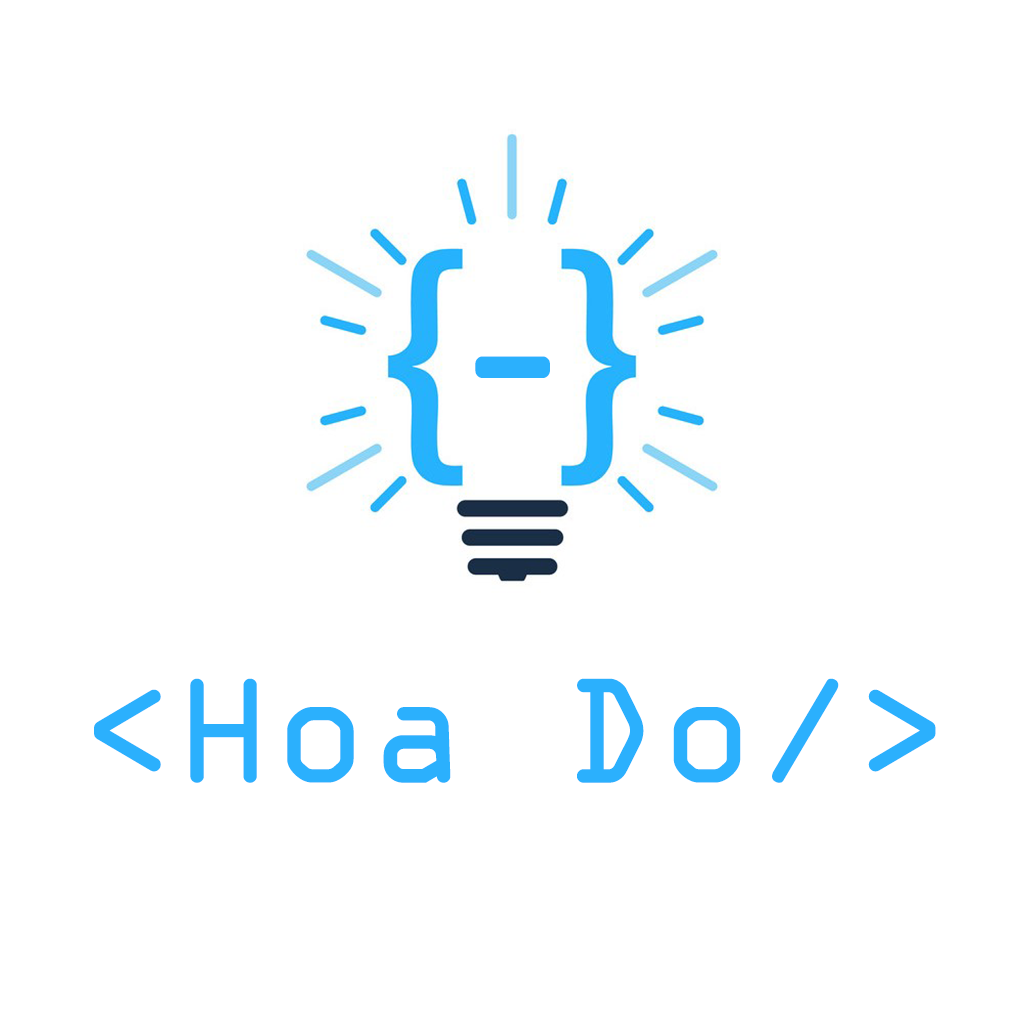
<style>
.page{position:relative;width:1024px;height:1024px;background:#ffffff}
.page>*{position:absolute;margin:0}
.t1{font:180px "OCRAExtended";color:#2bb0fd}
.t2{font:160px "OCRAExtended";color:#2bb0fd}
</style>
<div class="page">
<p class="t1" style="left:475px;top:356px;width:75px;height:22px">-</p>
<p class="t2" style="left:94px;top:678px;width:842px;height:105px">&lt;Hoa Do/&gt;</p>
</div>
